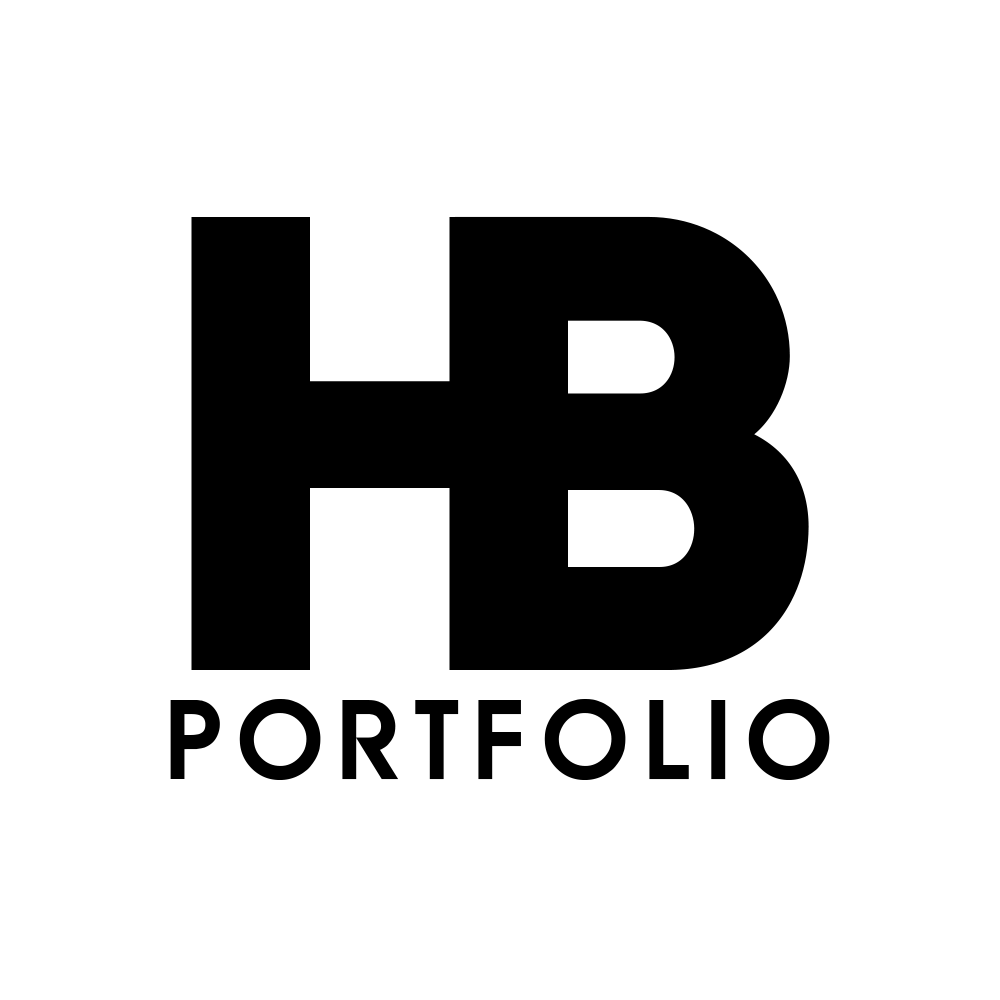
<style>
.page{position:relative;width:1000px;height:1000px;background:#ffffff}
.page>*{position:absolute;margin:0}
.t1{font:647.7px "Intro";color:#000000}
.t2{font:102px "Armguard";letter-spacing:0.2em;color:#000000}
</style>
<div class="page">
<p class="t1" style="left:191px;top:217px;width:377px;height:453px">H</p>
<p class="t1" style="left:455px;top:216px;width:354px;height:454px">B</p>
<p class="t2" style="left:170px;top:699px;width:660px;height:81px">PORTFOLIO</p>
</div>
